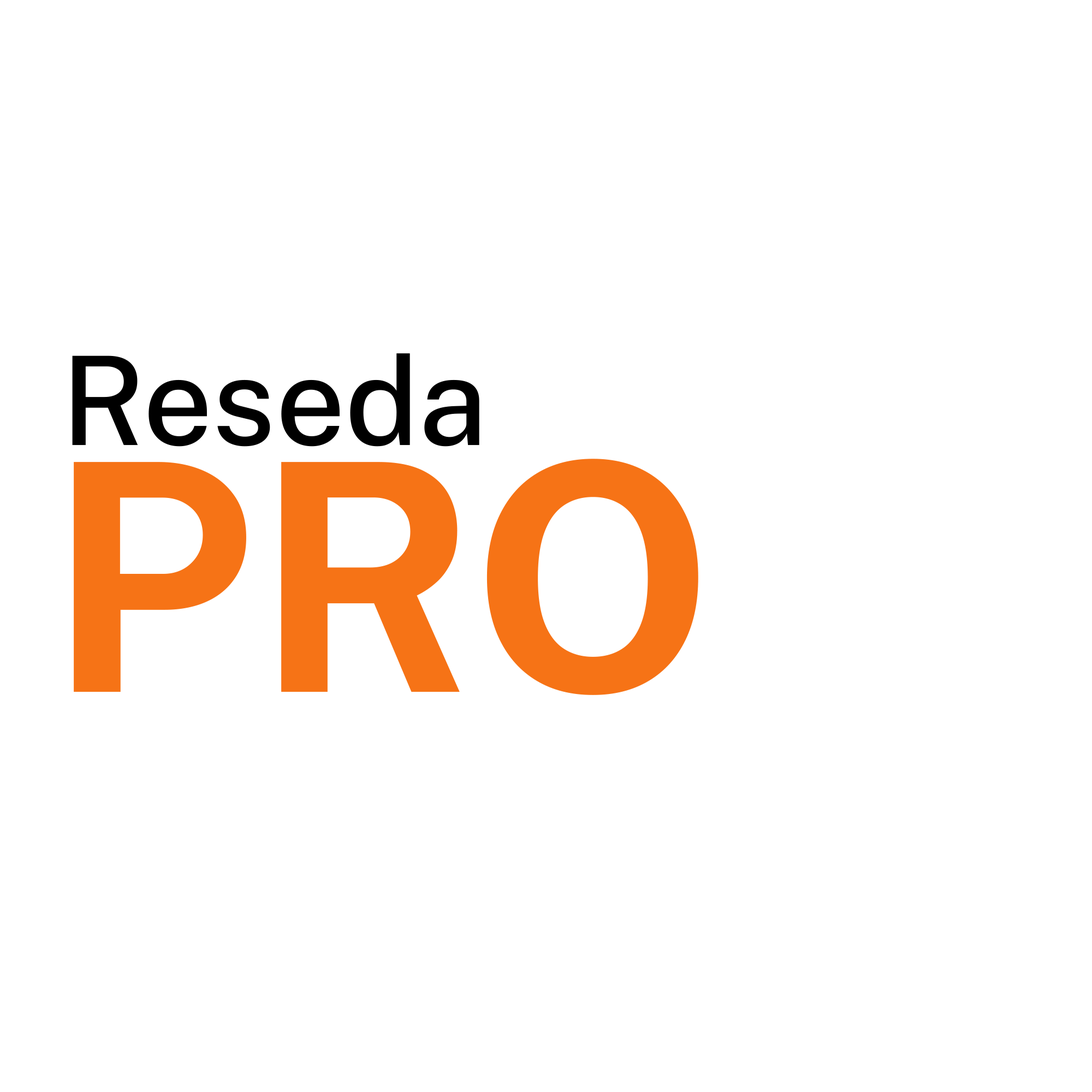
<style>
.page{position:relative;width:1092px;height:1092px;background:#ffffff}
.page>*{position:absolute;margin:0}
.t1{font:123.3px "PublicSans-Medium";color:#000000}
.t2{font:317.8px "PublicSans-Bold";color:#f67316}
</style>
<div class="page">
<p class="t1" style="left:72px;top:353px;width:407px;height:94px">Reseda</p>
<p class="t2" style="left:74px;top:459px;width:624px;height:236px">PRO</p>
</div>
